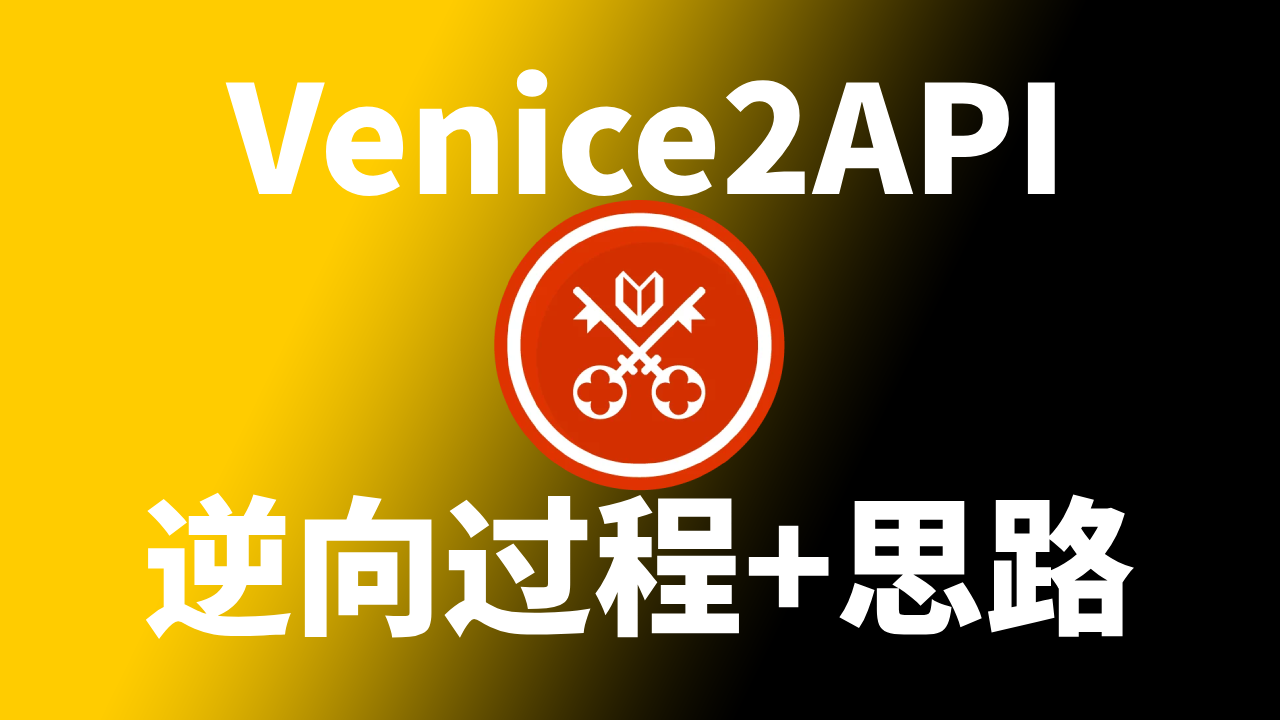
<style>
.page{position:relative;width:1280px;height:720px;background:#000000}
.page>*{position:absolute;margin:0}
.t1{font:150px "SourceHanSansSC-Heavy";color:#ffffff}
</style>
<div class="page">
<p class="t1" style="left:225px;top:69px;width:830px;height:128px">Venice2API</p>
<p class="t1" style="left:145px;top:492px;width:989px;height:147px">逆向过程+思路</p>
</div>
